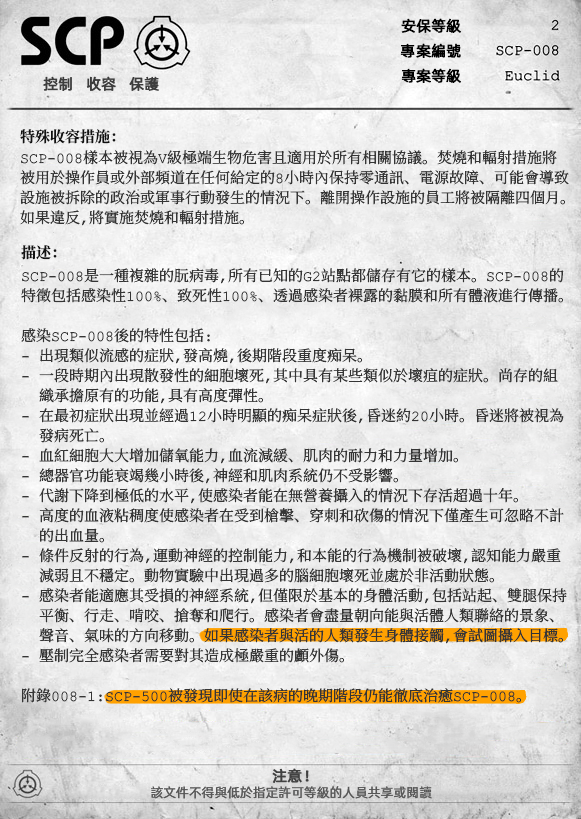
<style>
.page{position:relative;width:581px;height:819px}
.page>*{position:absolute;margin:0}
.t1{font:15px "AlibabaPuHuiTiR";color:#000000;font-weight:bold}
.t2{font:15px "AlibabaPuHuiTiR";color:#3d3d3d;font-weight:bold}
.t3{font:15px "ContainmentBreach-Bold";color:#121212}
.t4{font:15px/20px "ContainmentBreach-Regular";color:#353535}
.t5{font:15px "AlibabaPuHuiTiR";color:#414141;font-weight:bold}
.t6{font:13px "AlibabaPuHuiTiR";color:#575757}
</style>
<div class="page">
<p class="t1" style="left:401px;top:18px;width:60px;height:15px">安保等級</p>
<p class="t1" style="left:400px;top:43px;width:61px;height:15px">專案編號</p>
<p class="t2" style="left:43px;top:76px;width:116px;height:15px">控制   收容   保護</p>
<p class="t1" style="left:401px;top:68px;width:60px;height:15px">專案等級</p>
<p class="t3" style="left:20px;top:129px;width:96px;height:15px">特殊收容措施：</p>
<p class="t4" style="left:20px;top:150px;width:549px;height:76px">SCP-008樣本被視為V級極端生物危害且適用於所有相關協議。焚燒和輻射措施將<br>被用於操作員或外部頻道在任何給定的8小時內保持零通訊、電源故障、可能會導致<br>設施被拆除的政治或軍事行動發生的情況下。離開操作設施的員工將被隔離四個月。<br>如果違反，將實施焚燒和輻射措施。</p>
<p class="t3" style="left:21px;top:245px;width:36px;height:15px">描述：</p>
<p class="t4" style="left:21px;top:268px;width:546px;height:435px">SCP-008是一種複雜的朊病毒，所有已知的G2站點都儲存有它的樣本。SCP-008的<br>特徵包括感染性100%、致死性100%、透過感染者裸露的黏膜和所有體液進行傳播。<br><br>感染SCP-008後的特性包括：<br>- 出現類似流感的症狀，發高燒，後期階段重度痴呆。<br>- 一段時期內出現散發性的細胞壞死，其中具有某些類似於壞疽的症狀。尚存的組<br>  織承擔原有的功能，具有高度彈性。<br>- 在最初症狀出現並經過12小時明顯的痴呆症狀後，昏迷約20小時。昏迷將被視為<br>  發病死亡。<br>- 血紅細胞大大增加儲氧能力，血流減緩、肌肉的耐力和力量增加。<br>- 總器官功能衰竭幾小時後，神經和肌肉系統仍不受影響。<br>- 代謝下降到極低的水平，使感染者能在無營養攝入的情況下存活超過十年。<br>- 高度的血液粘稠度使感染者在受到槍擊、穿刺和砍傷的情況下僅產生可忽略不計<br>  的出血量。<br>- 條件反射的行為，運動神經的控制能力，和本能的行為機制被破壞，認知能力嚴重<br>  減弱且不穩定。動物實驗中出現過多的腦細胞壞死並處於非活動狀態。<br>- 感染者能適應其受損的神經系統，但僅限於基本的身體活動，包括站起、雙腿保持<br>  平衡、行走、啃咬、搶奪和爬行。感染者會盡量朝向能與活體人類聯絡的景象、<br>  聲音、氣味的方向移動。如果感染者與活的人類發生身體接觸，會試圖攝入目標。<br>- 壓制完全感染者需要對其造成極嚴重的顱外傷。<br><br>附錄008-1：SCP-500被發現即使在該病的晚期階段仍能徹底治癒SCP-008。</p>
<p class="t5" style="left:272px;top:768px;width:37px;height:15px">注意！</p>
<p class="t6" style="left:151px;top:786px;width:281px;height:13px">該文件不得與低於指定許可等級的人員共享或閱讀</p>
</div>
